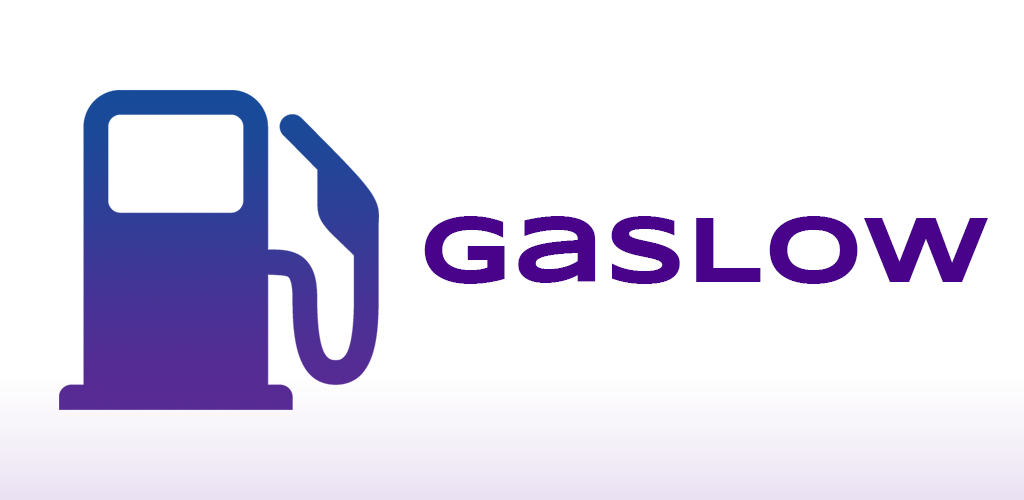
<style>
.page{position:relative;width:1024px;height:500px;background:#ffffff}
.page>*{position:absolute;margin:0}
.t1{font:96px "Syncopate-Bold";color:#4a038b}
</style>
<div class="page">
<p class="t1" style="left:424px;top:216px;width:564px;height:68px">GasLow</p>
</div>
